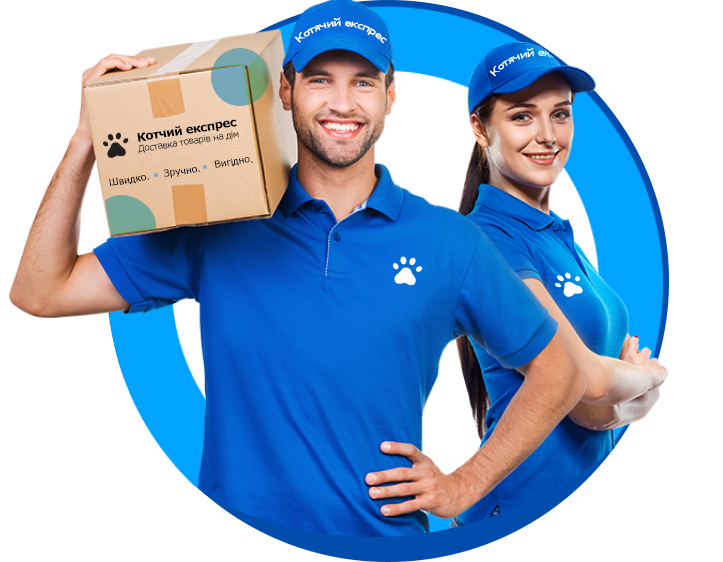
<style>
.page{position:relative;width:723px;height:562px;background:#ffffff}
.page>*{position:absolute;margin:0}
.t1{font:10px "Verdana";letter-spacing:-0.05em;color:#ffffff}
.t2{font:9px "Verdana";letter-spacing:-0.05em;color:#000000}
.t3{font:12px "Verdana-Bold";letter-spacing:-0.05em;color:#000000}
.t4{font:10px "Verdana";letter-spacing:-0.05em;color:#000000}
.t5{font:9.7px "Verdana";letter-spacing:-0.05em;color:#000000;scale:1.03 1}
</style>
<div class="page">
<p class="t1" style="left:294px;top:17px;width:93px;height:27px;text-align:center">Котячий експрес</p>
<p class="t2" style="left:137px;top:119px;width:102px;height:35px;text-align:center;rotate:-9deg"><span class="t3">Котчий експрес<br></span>Доставка товарів на дім</p>
<p class="t4" style="left:214px;top:157px;width:39px;height:11px;rotate:-9deg">Вигідно.</p>
<p class="t5" style="left:163px;top:167px;width:37px;height:11px;rotate:-9deg">Зручно.</p>
<p class="t4" style="left:109px;top:175px;width:40px;height:11px;rotate:-9deg">Швидко.</p>
</div>
